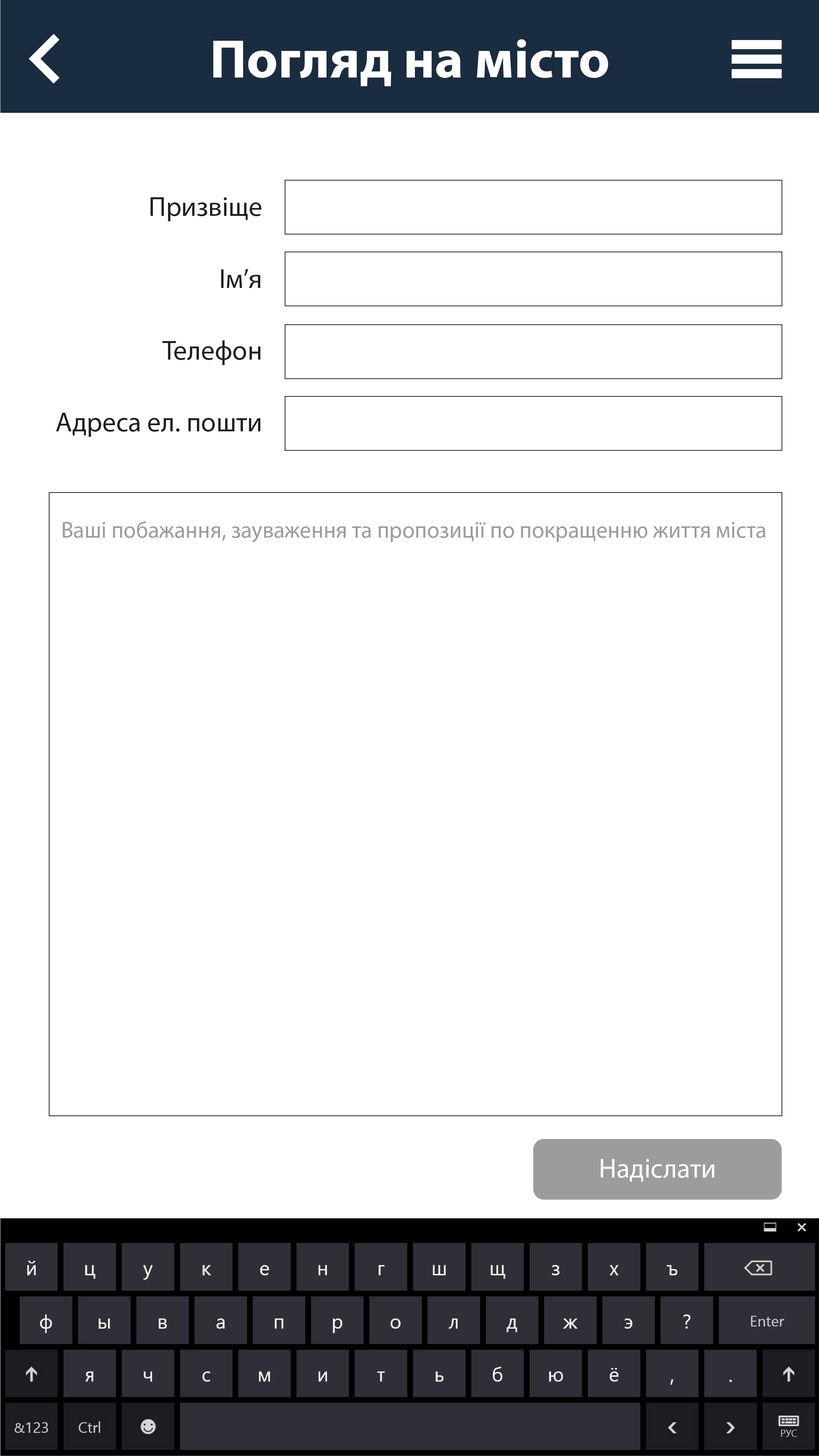
<style>
.page{position:relative;width:819px;height:1456px;background:#ffffff}
.page>*{position:absolute;margin:0}
.t1{font:54.6px "MyriadPro-Bold";color:#ffffff}
.t2{font:27.3px "MyriadPro-Regular";color:#1d1d1b}
.t3{font:22.7px "MyriadPro-Regular";color:#9c9c9a}
.t4{font:27.3px "MyriadPro-Regular";color:#ffffff}
</style>
<div class="page">
<p class="t1" style="left:213px;top:39px;width:395px;height:47px">Погляд на місто</p>
<p class="t2" style="left:150px;top:197px;width:111px;height:24px">Призвіще</p>
<p class="t2" style="left:221px;top:269px;width:39px;height:19px">Ім’я</p>
<p class="t2" style="left:162px;top:340px;width:99px;height:25px">Телефон</p>
<p class="t2" style="left:56px;top:413px;width:205px;height:24px">Адреса ел. пошти</p>
<p class="t3" style="left:63px;top:521px;width:702px;height:21px">Ваші побажання, зауваження та пропозиції по покращенню життя міста</p>
<p class="t4" style="left:601px;top:1159px;width:114px;height:23px">Надіслати</p>
</div>
